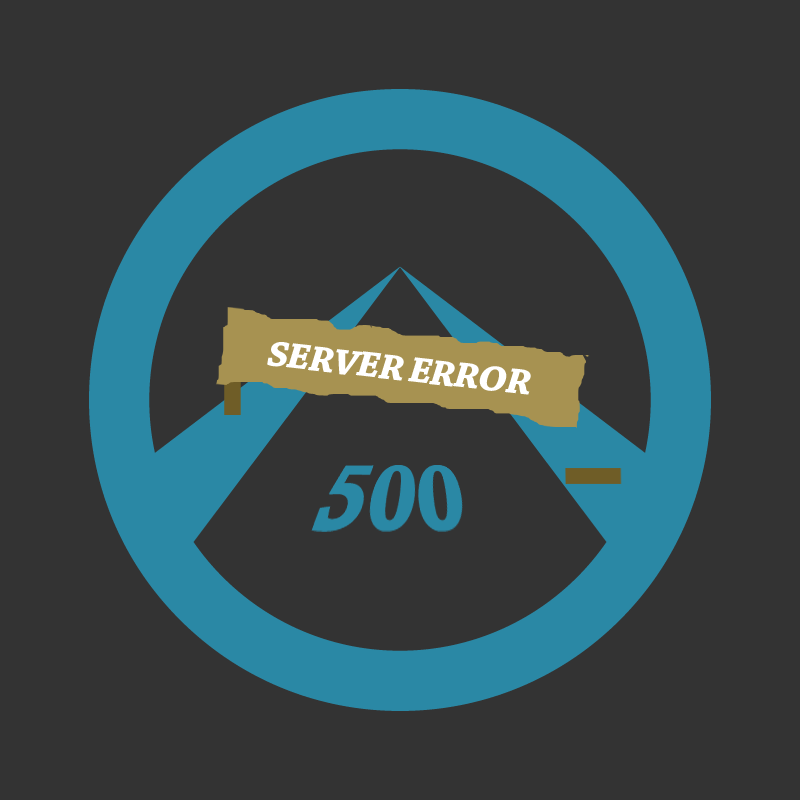
<style>
.page{position:relative;width:800px;height:800px;background:#333333}
.page>*{position:absolute;margin:0}
.t1{font:37.5px "ChaparralPro-BoldIt";letter-spacing:-0.035em;color:#ffffff;scale:1.08 1}
</style>
<div class="page">
<p class="t1" style="left:267px;top:342px;width:264px;height:53px;rotate:6deg">SERVER ERROR</p>
</div>
